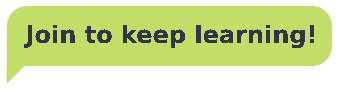
<style>
.page{position:relative;width:341px;height:88px;background:#c1de68}
.page>*{position:absolute;margin:0}
.t1{font:24px "COCOGOOSE-DemiBold";color:#333449}
</style>
<div class="page">
<p class="t1" style="left:24px;top:24px;width:291px;height:25px">Join to keep learning!</p>
</div>
